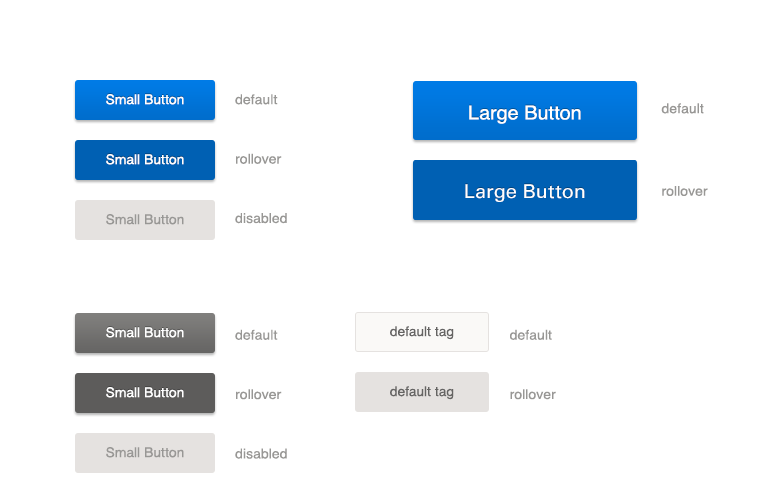
<style>
.page{position:relative;width:782px;height:490px;background:#ffffff}
.page>*{position:absolute;margin:0}
.t1{font:13.4px "Helvetica";color:#ffffff;scale:1.04 1}
.t2{font:13.5px/47.3px "Helvetica";color:#989795;scale:1.04 1}
.t3{font:19.2px "Helvetica";color:#ffffff;scale:1.04 1}
.t4{font:13.5px/70.4px "Helvetica";color:#989795;scale:1.04 1}
.t5{font:19.2px "UniversLTStd";color:#ffffff;scale:1.04 1}
.t6{font:13.4px "Helvetica";color:#989795;scale:1.04 1}
.t7{font:13.4px "Helvetica";color:#656463;scale:1.04 1}
</style>
<div class="page">
<p class="t1" style="left:106px;top:94px;width:78px;height:11px">Small Button</p>
<p class="t2" style="left:235px;top:94px;width:52px;height:130px">default <br>rollover<br>disabled</p>
<p class="t3" style="left:469px;top:105px;width:112px;height:19px">Large Button</p>
<p class="t4" style="left:661px;top:103px;width:47px;height:93px">default <br>rollover</p>
<p class="t1" style="left:106px;top:154px;width:78px;height:11px">Small Button</p>
<p class="t5" style="left:465px;top:184px;width:120px;height:18px">Large Button</p>
<p class="t6" style="left:106px;top:214px;width:78px;height:11px">Small Button</p>
<p class="t1" style="left:106px;top:327px;width:78px;height:11px">Small Button</p>
<p class="t2" style="left:235px;top:329px;width:52px;height:130px">default <br>rollover<br>disabled</p>
<p class="t7" style="left:390px;top:326px;width:64px;height:14px">default tag</p>
<p class="t2" style="left:510px;top:329px;width:46px;height:71px">default <br>rollover</p>
<p class="t1" style="left:106px;top:387px;width:78px;height:11px">Small Button</p>
<p class="t7" style="left:390px;top:386px;width:64px;height:14px">default tag</p>
<p class="t6" style="left:106px;top:447px;width:78px;height:11px">Small Button</p>
</div>
